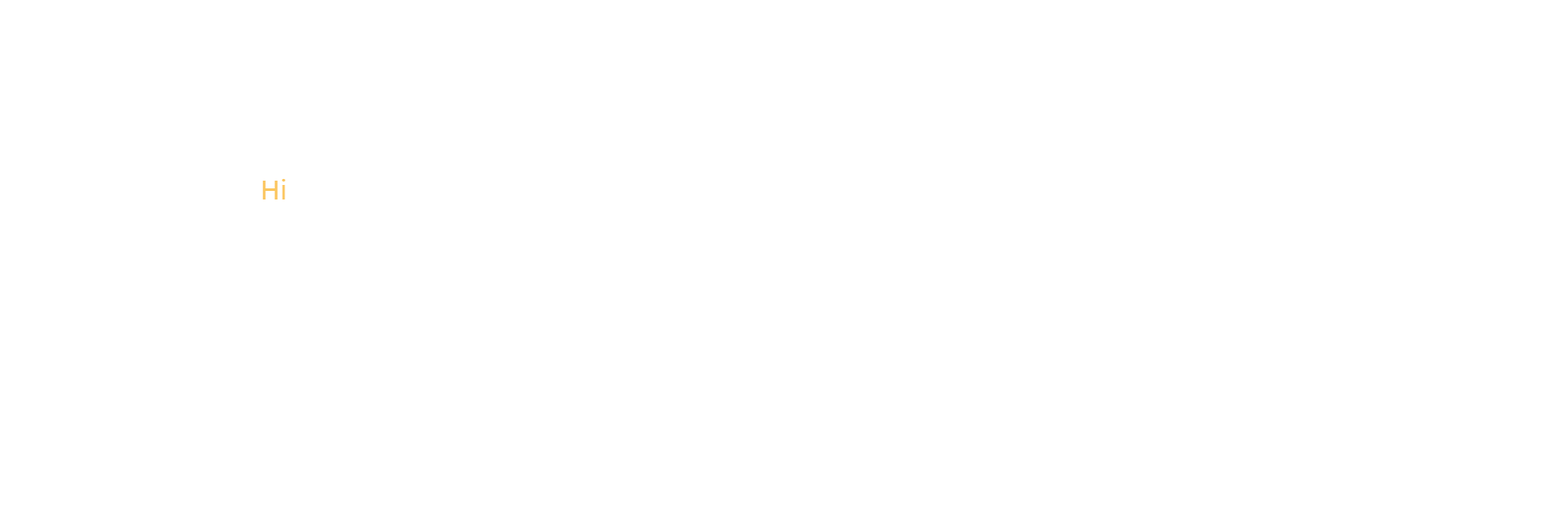
<style>
.page{position:relative;width:1568px;height:518px;background:#ffffff}
.page>*{position:absolute;margin:0}
.t1{font:27.4px "Ubuntu";color:#fbc761}
</style>
<div class="page">
<p class="t1" style="left:262px;top:179px;width:23px;height:21px">Hi</p>
</div>
